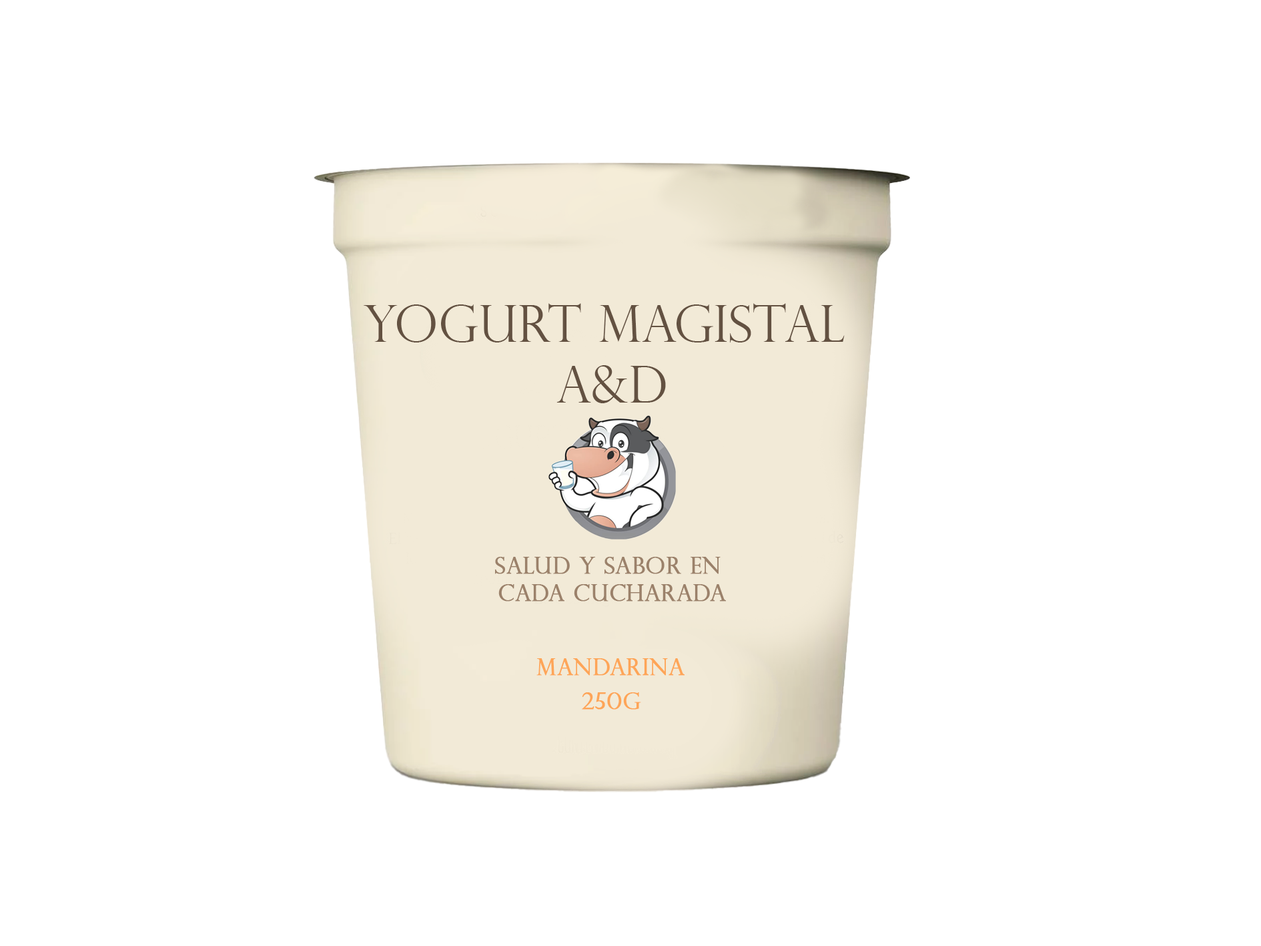
<style>
.page{position:relative;width:1261px;height:946px;background:#ffffff}
.page>*{position:absolute;margin:0}
.t1{font:50.8px "PerpetuaTitlingMT-Light";color:#635141}
.t2{font:22.9px "PerpetuaTitlingMT-Light";color:#9b816a;font-weight:bold}
.t3{font:22.9px "PerpetuaTitlingMT-Light";color:#fea557;font-weight:bold}
</style>
<div class="page">
<p class="t1" style="left:363px;top:303px;width:482px;height:100px;text-align:center">Yogurt Magistal <br>A&amp;D</p>
<p class="t2" style="left:495px;top:557px;width:231px;height:44px;text-align:center">salud y sabor en <br>cada cucharada</p>
<p class="t3" style="left:536px;top:658px;width:149px;height:17px">Mandarina</p>
<p class="t3" style="left:582px;top:692px;width:59px;height:17px">250g</p>
</div>
